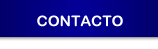
<style>
.page{position:relative;width:158px;height:49px}
.page>*{position:absolute;margin:0}
.t1{font:15px "ArialRoundedMTBold";color:#ffffff}
</style>
<div class="page">
<p class="t1" style="left:37px;top:15px;width:86px;height:12px">CONTACTO</p>
</div>
